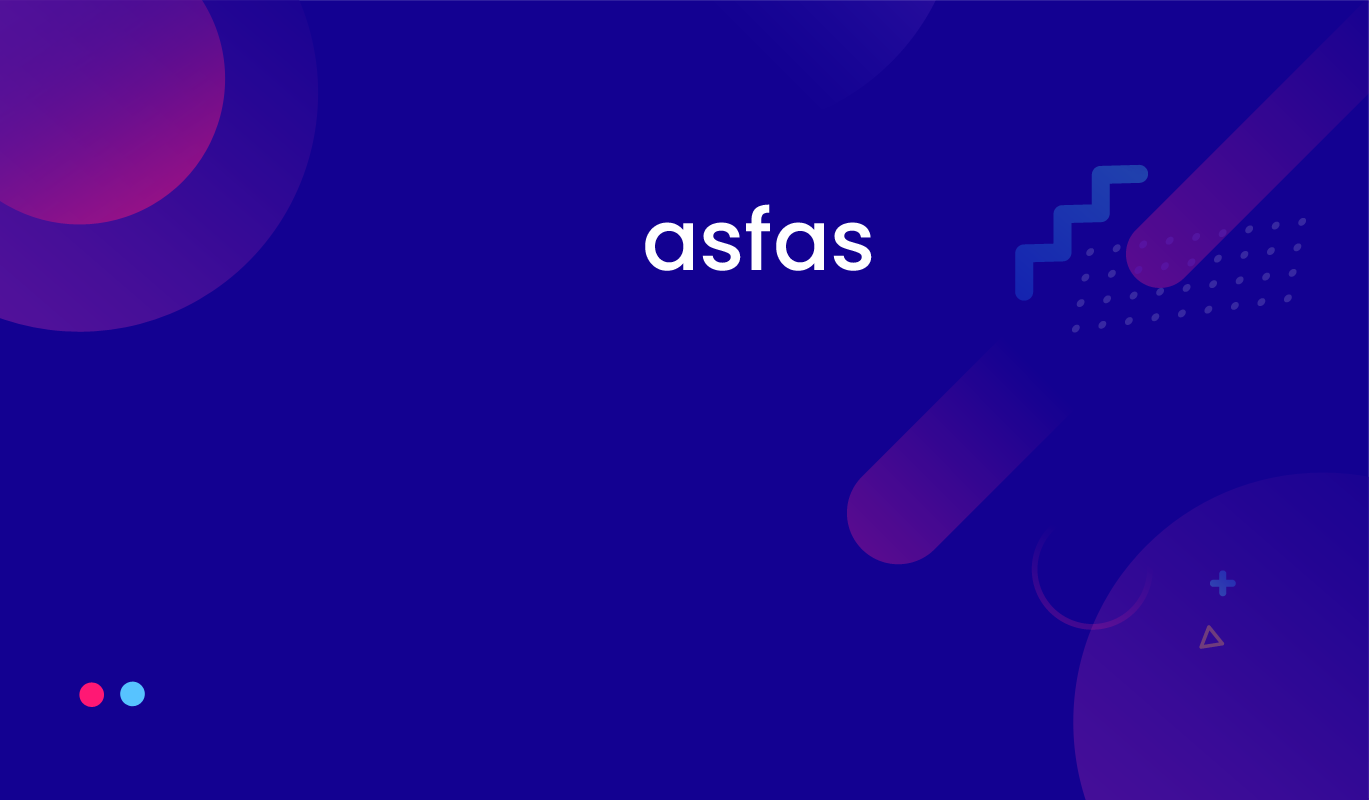
<style>
.page{position:relative;width:1369px;height:800px;background:#130191}
.page>*{position:absolute;margin:0}
.t1{font:84.7px "Poppins-Medium";color:#ffffff}
</style>
<div class="page">
<p class="t1" style="left:645px;top:204px;width:227px;height:67px">asfas</p>
</div>
